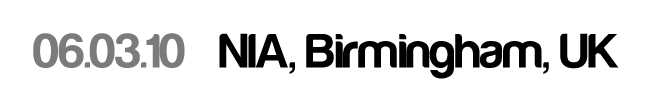
<style>
.page{position:relative;width:650px;height:100px;background:#ffffff}
.page>*{position:absolute;margin:0}
.t1{font:50px "Harabara-Bold";color:#000000}
.t2{font:50px "Harabara-Bold";color:#7b7b7b}
</style>
<div class="page">
<p class="t1" style="left:33px;top:33px;width:586px;height:46px"><span class="t2">06.03.10</span>   NIA, Birmingham, UK</p>
</div>
